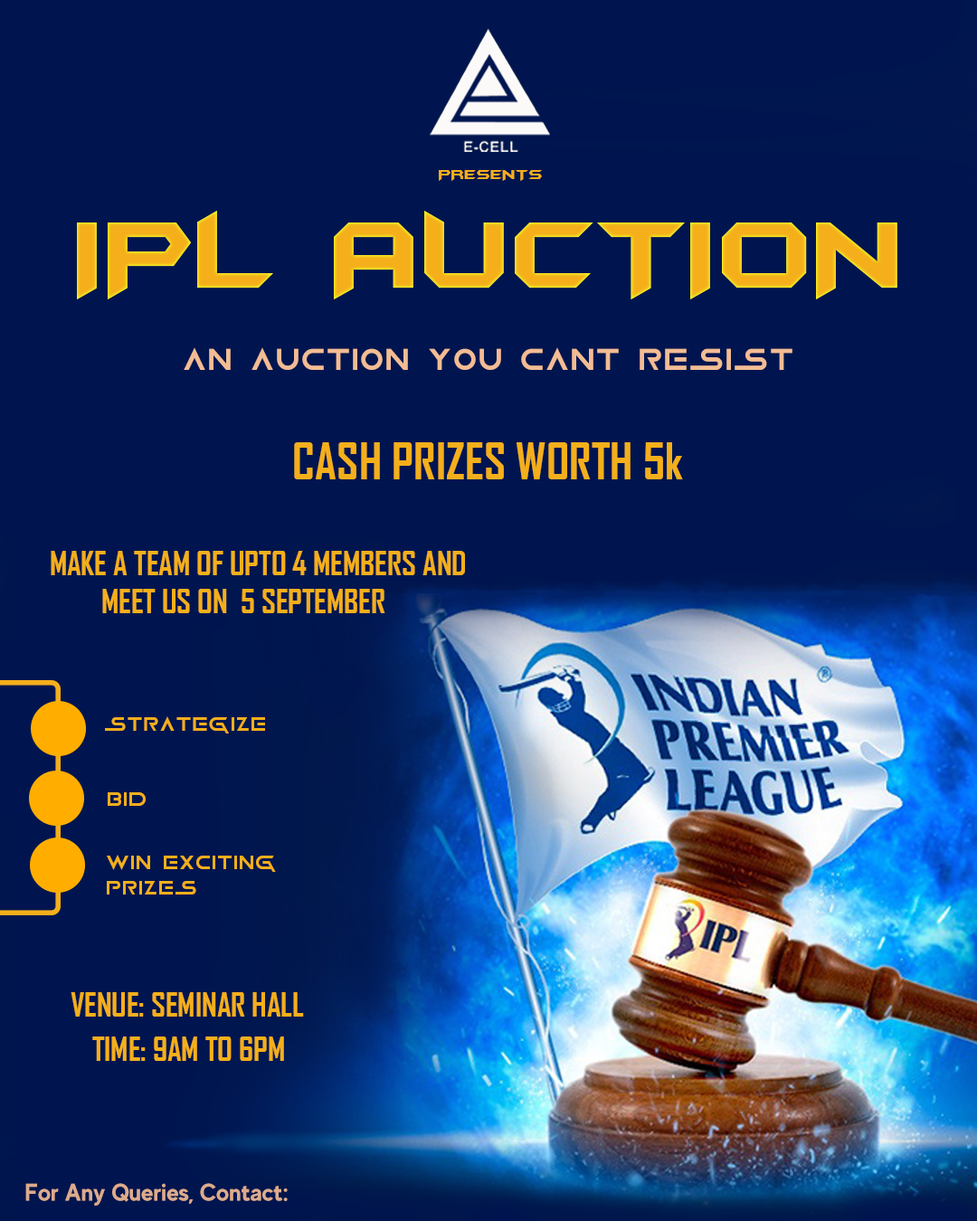
<style>
.page{position:relative;width:977px;height:1221px;background:#00154f}
.page>*{position:absolute;margin:0}
.t1{font:15.7px "BatmanForeverAlternate";color:#f4af1b}
.t2{font:110.9px "BatmanForeverAlternate";color:#f4af1b}
.t3{font:33.8px "GameOfSquids";color:#f2bc94}
.t4{font:48.2px "AgencyFB-Bold";color:#f4af1b}
.t5{font:31.4px/37.4px "AgencyFB-Bold";color:#f4af1b}
.t6{font:21.7px "GameOfSquids";color:#f4af1b}
.t7{font:21.7px/25.3px "GameOfSquids";color:#f4af1b}
.t8{font:31.4px "AgencyFB-Bold";color:#f4af1b}
.t9{font:24.1px "MADEEvolveSans-Bold";color:#dcac8c}
</style>
<div class="page">
<p class="t1" style="left:439px;top:170px;width:103px;height:11px">PRESENTS</p>
<p class="t2" style="left:77px;top:211px;width:820px;height:88px">IPL AUCTION</p>
<p class="t3" style="left:184px;top:347px;width:608px;height:23px">AN AUCTION YOU CANT RESIST</p>
<p class="t4" style="left:294px;top:442px;width:389px;height:37px">CASH PRIZES WORTH 5k</p>
<p class="t5" style="left:51px;top:551px;width:414px;height:62px">MAKE A TEAM OF UPTO 4 MEMBERS AND<br>        MEET US ON  5 SEPTEMBER</p>
<p class="t6" style="left:105px;top:716px;width:160px;height:17px">STRATEGIZE</p>
<p class="t6" style="left:108px;top:792px;width:38px;height:14px">BID</p>
<p class="t7" style="left:107px;top:855px;width:169px;height:39px">WIN EXCITING <br>PRIZES</p>
<p class="t8" style="left:71px;top:992px;width:233px;height:24px">VENUE: SEMINAR HALL</p>
<p class="t8" style="left:92px;top:1036px;width:192px;height:25px">TIME: 9AM TO 6PM</p>
<p class="t9" style="left:25px;top:1183px;width:263px;height:23px">For Any Queries, Contact:</p>
</div>
